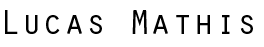
<style>
.page{position:relative;width:264px;height:47px;background:#ffffff}
.page>*{position:absolute;margin:0}
.t1{font:36px "OratorStd";color:#000000}
</style>
<div class="page">
<p class="t1" style="left:5px;top:10px;width:248px;height:24px">Lucas Mathis</p>
</div>
